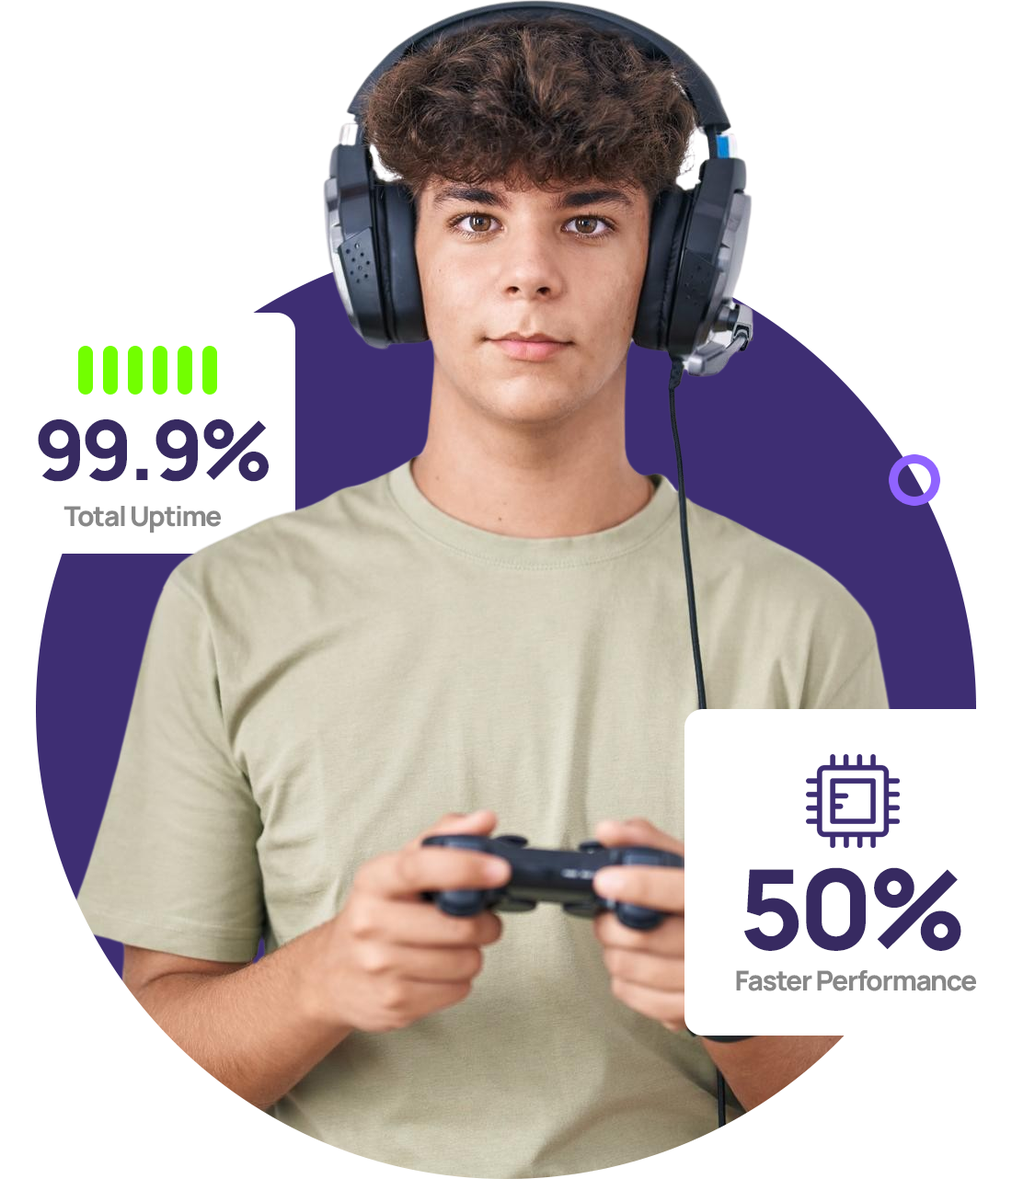
<style>
.page{position:relative;width:1012px;height:1179px;background:#ffffff}
.page>*{position:absolute;margin:0}
.t1{font:82.8px "Manrope-ExtraBold";letter-spacing:-0.05em;color:#372a61}
.t2{font:27.6px "Manrope-ExtraBold";letter-spacing:-0.05em;color:#888888}
.t3{font:110.3px "Manrope-ExtraBold";letter-spacing:-0.05em;color:#372a61}
</style>
<div class="page">
<p class="t1" style="left:38px;top:418px;width:231px;height:64px">99.9%</p>
<p class="t2" style="left:63px;top:506px;width:158px;height:27px">Total Uptime</p>
<p class="t3" style="left:744px;top:867px;width:217px;height:84px">50%</p>
<p class="t2" style="left:736px;top:970px;width:240px;height:21px">Faster Performance</p>
</div>
